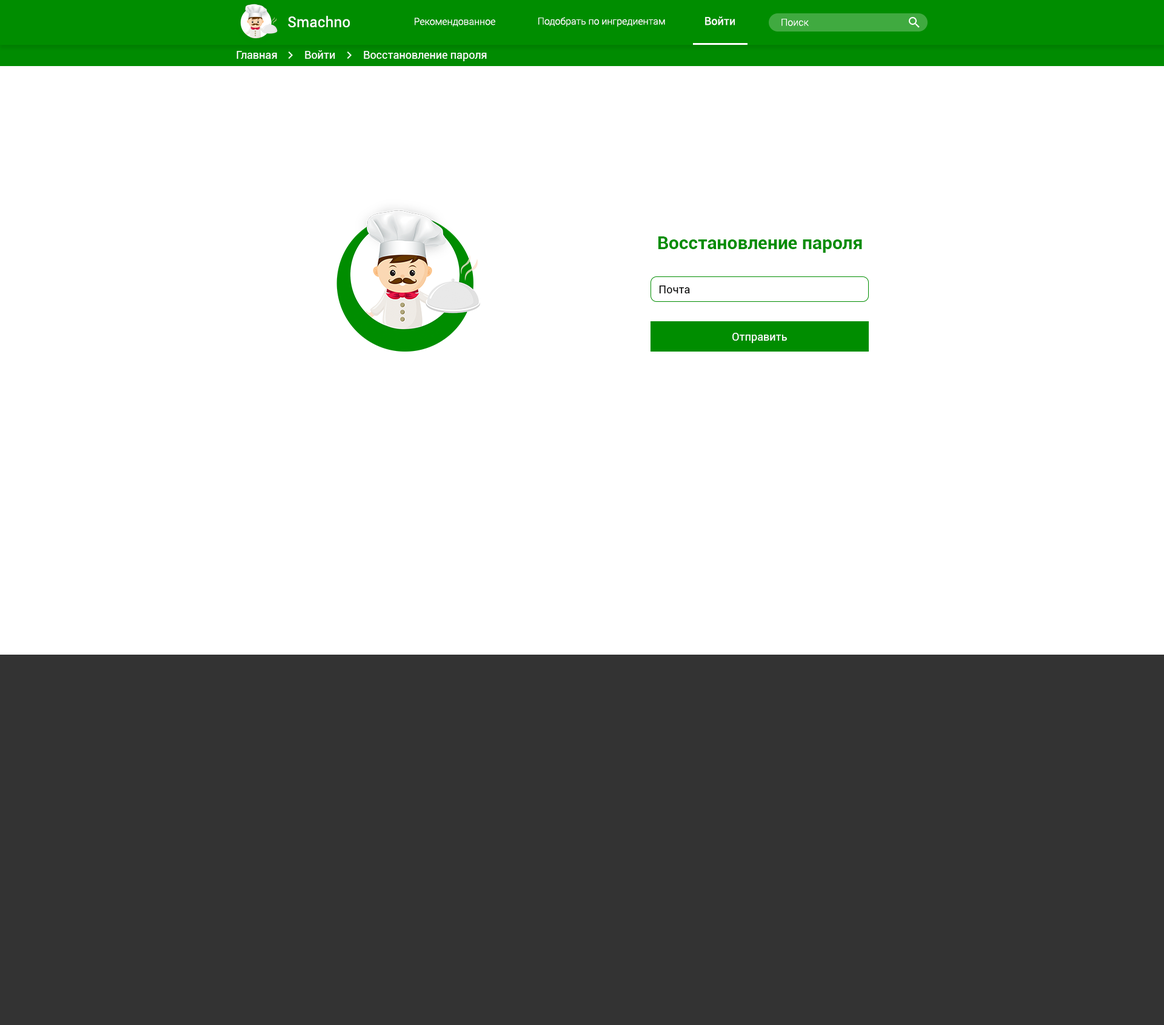
<style>
.page{position:relative;width:1164px;height:1025px;background:#ffffff}
.page>*{position:absolute;margin:0}
.t1{font:14.5px "Roboto-Regular";letter-spacing:0.01em;color:#ffffff}
.t2{font:9.7px "Roboto-Light";color:#ffffff}
.t3{font:10.9px "Roboto-Regular";color:#ffffff}
.t4{font:18.2px "Roboto-Bold";color:#008d00}
.t5{font:10.9px "Roboto-Regular";color:#000000}
</style>
<div class="page">
<p class="t1" style="left:288px;top:16px;width:62px;height:11px">Smachno</p>
<p class="t2" style="left:415px;top:18px;width:80px;height:9px">Рекомендованное</p>
<p class="t2" style="left:538px;top:17px;width:127px;height:10px">Подобрать по ингредиентам</p>
<p class="t3" style="left:705px;top:16px;width:30px;height:9px">Войти</p>
<p class="t2" style="left:781px;top:19px;width:27px;height:7px">Поиск</p>
<p class="t3" style="left:236px;top:51px;width:41px;height:8px">Главная</p>
<p class="t3" style="left:305px;top:50px;width:30px;height:9px">Войти</p>
<p class="t3" style="left:364px;top:51px;width:123px;height:10px">Восстановление пароля</p>
<p class="t4" style="left:658px;top:236px;width:204px;height:17px">Восстановление пароля</p>
<p class="t5" style="left:659px;top:285px;width:31px;height:8px">Почта</p>
<p class="t3" style="left:732px;top:333px;width:55px;height:10px">Отправить</p>
</div>
